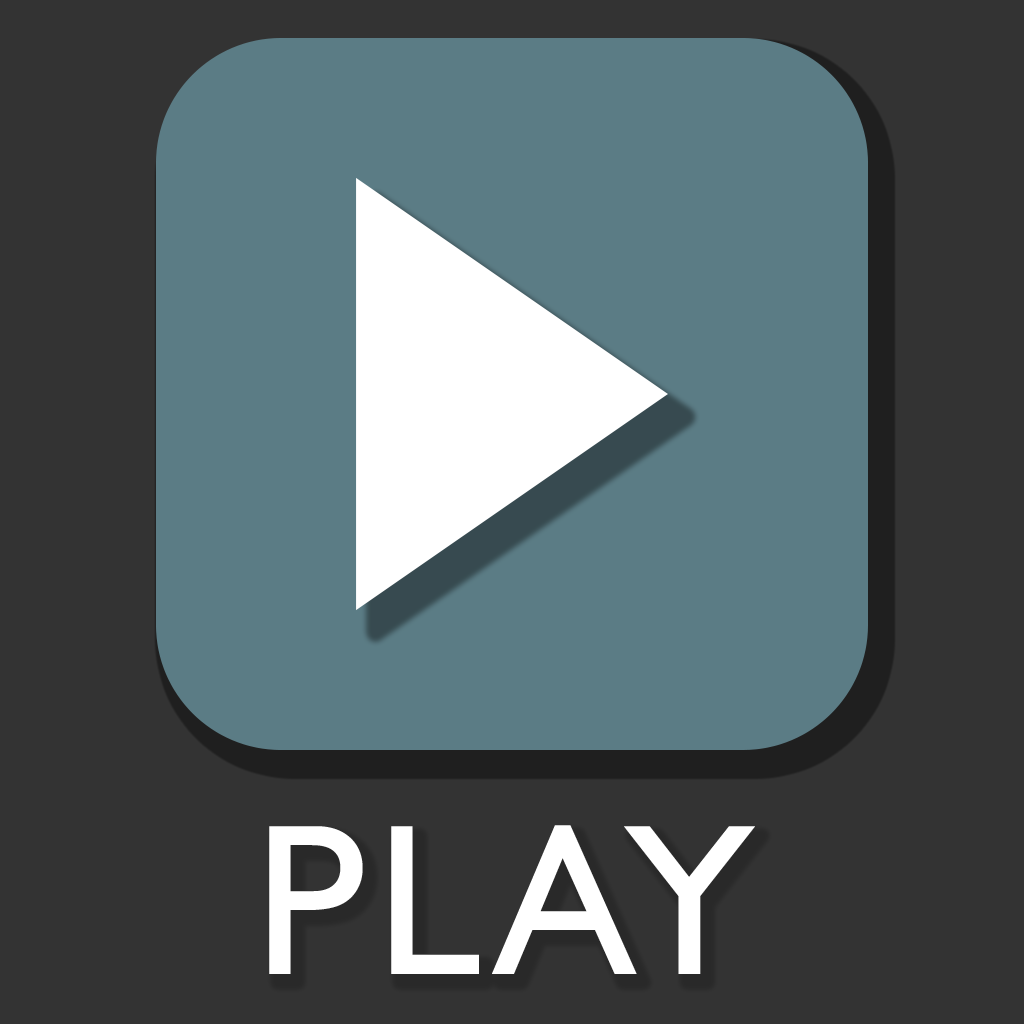
<style>
.page{position:relative;width:1024px;height:1024px;background:#333333}
.page>*{position:absolute;margin:0}
.t1{font:216.7px "GillSansMT";letter-spacing:0.05em;color:#ffffff}
</style>
<div class="page">
<p class="t1" style="left:269px;top:825px;width:486px;height:149px">PLAY</p>
</div>
